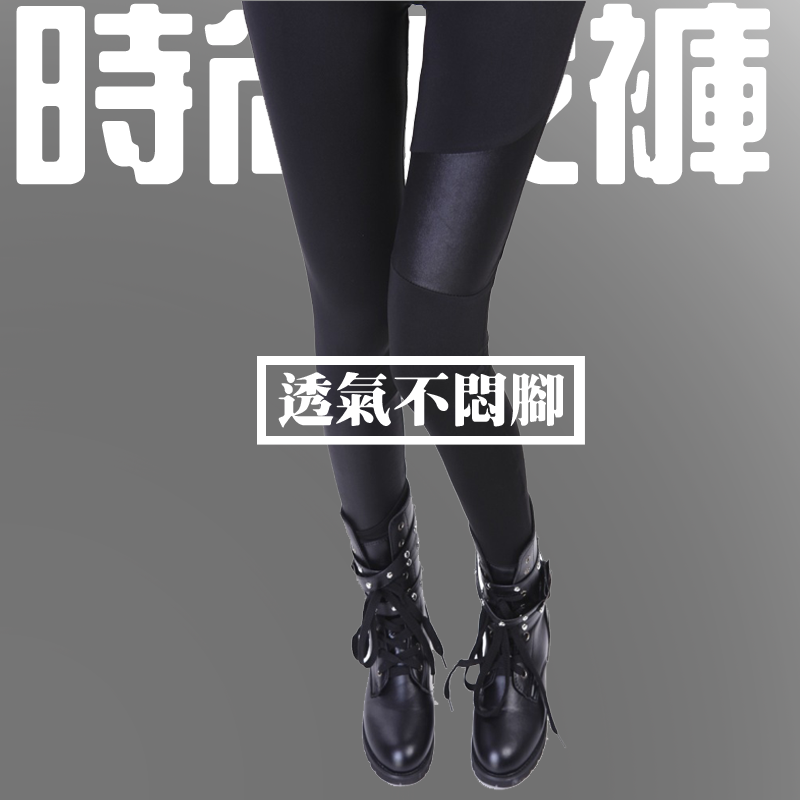
<style>
.page{position:relative;width:800px;height:800px}
.page>*{position:absolute;margin:0}
.t1{font:192.4px "HanWangZonYi";color:#ffffff}
.t2{font:58.4px "HanWangMingBlack";color:#ffffff}
</style>
<div class="page">
<p class="t1" style="left:16px;top:2px;width:754px;height:183px">時尚皮褲</p>
<p class="t2" style="left:278px;top:371px;width:286px;height:57px">透氣不悶腳</p>
</div>
